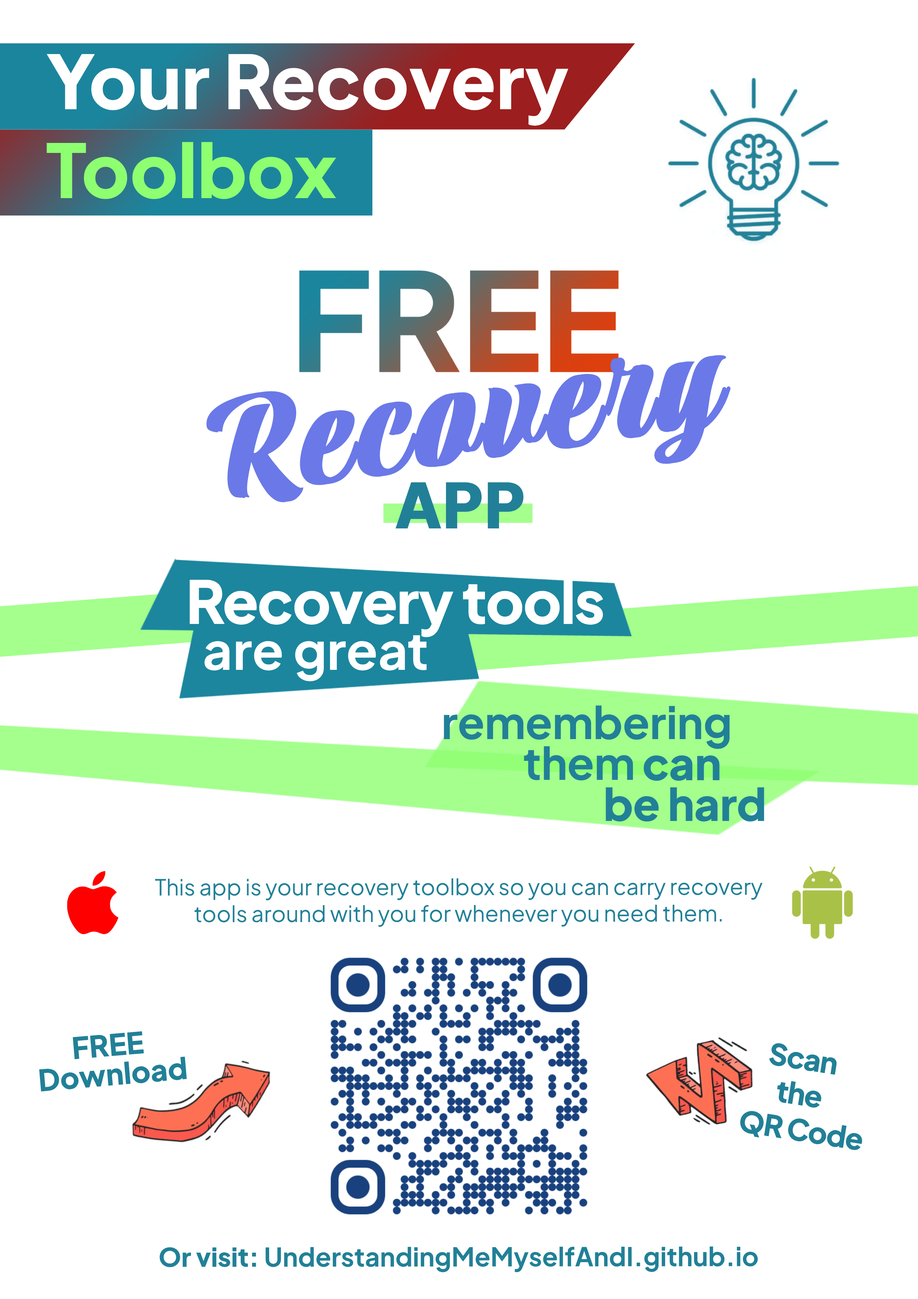
<style>
.page{position:relative;width:918px;height:1299px;background:#ffffff}
.page>*{position:absolute;margin:0}
.t1{font:74px "PlusJakartaSans-ExtraBold";color:#ffffff}
.t2{font:74px "PlusJakartaSans-ExtraBold";color:#8dff71}
.t3{font:160.2px "Praise-Regular";color:#6a79e7;font-weight:bold}
.t4{font:61.9px "PlusJakartaSans-ExtraBold";color:#218097;font-weight:bold}
.t5{font:59.2px "PlusJakartaSans-ExtraBold";letter-spacing:-0.021em;color:#ffffff}
.t6{font:51.8px "PlusJakartaSans-Bold";color:#ffffff}
.t7{font:44.4px/40.7px "PlusJakartaSans-Bold";letter-spacing:-0.005em;color:#218097}
.t8{font:44.4px/40.7px "PlusJakartaSans-ExtraBold";letter-spacing:-0.005em;color:#218097}
.t9{font:22.2px "PlusJakartaSans-Regular";color:#218097}
.t10{font:29.6px/29.2px "PlusJakartaSans-ExtraBold";color:#218097}
.t11{font:29.6px "PlusJakartaSans-ExtraBold";letter-spacing:-0.029em;color:#218097}
.t12{font:25.9px "PlusJakartaSans-Bold";color:#218097}
.t13{font:25.9px "PlusJakartaSans-ExtraBold";color:#218097}
</style>
<div class="page">
<p class="t1" style="left:47px;top:54px;width:522px;height:145px">Your Recovery <span class="t2">Toolbox</span></p>
<p class="t3" style="left:205px;top:355px;width:526px;height:148px;rotate:-8deg">Recovery</p>
<p class="t4" style="left:395px;top:482px;width:129px;height:46px">APP</p>
<p class="t5" style="left:190px;top:579px;width:413px;height:58px">Recovery tools</p>
<p class="t6" style="left:204px;top:635px;width:223px;height:46px">are great</p>
<p class="t7" style="left:444px;top:705px;width:286px;height:75px;text-align:right">remembering<br>them</p>
<p class="t8" style="left:606px;top:755px;width:159px;height:67px;text-align:right">can      <br>be hard</p>
<p class="t9" style="left:155px;top:878px;width:608px;height:49px;text-align:center">This app is your recovery toolbox so you can carry recovery tools around with you for whenever you need them.</p>
<p class="t10" style="left:39px;top:1031px;width:148px;height:60px;text-align:center;rotate:-5deg">FREE <br>Download</p>
<p class="t11" style="left:740px;top:1043px;width:123px;height:107px;text-align:right;rotate:9deg">Scan       <br>the             <br>QR Code</p>
<p class="t12" style="left:160px;top:1246px;width:598px;height:26px"><span class="t13">Or visit: </span>UnderstandingMeMyselfAndI.github.io</p>
</div>
